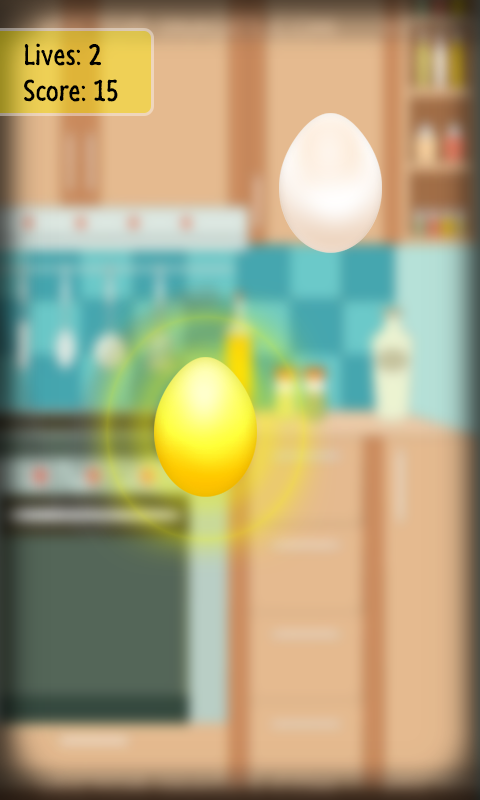
<style>
.page{position:relative;width:480px;height:800px}
.page>*{position:absolute;margin:0}
.t1{font:30px "SegoeMarker";color:#000000}
</style>
<div class="page">
<p class="t1" style="left:24px;top:43px;width:94px;height:59px">Lives: 2<br>Score: 15</p>
</div>
